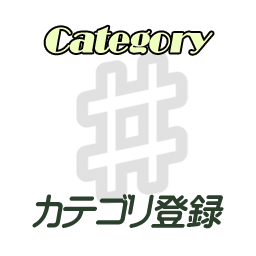
<style>
.page{position:relative;width:256px;height:256px;background:#ffffff}
.page>*{position:absolute;margin:0}
.t1{font:36px "Broadway";color:#eeffbf;font-weight:bold;font-style:italic}
.t2{font:36px "YentiEGP-Extra-SJIS";color:#2b402c;font-style:italic}
</style>
<div class="page">
<p class="t1" style="left:45px;top:26px;width:168px;height:28px">Category</p>
<p class="t2" style="left:32px;top:194px;width:192px;height:35px">カテゴリ登録</p>
</div>
